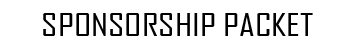
<style>
.page{position:relative;width:355px;height:50px;background:#ffffff}
.page>*{position:absolute;margin:0}
.t1{font:30px "AgencyFB-Reg";color:#000000;scale:1.3 1}
</style>
<div class="page">
<p class="t1" style="left:43px;top:13px;width:270px;height:23px">SPONSORSHIP PACKET</p>
</div>
